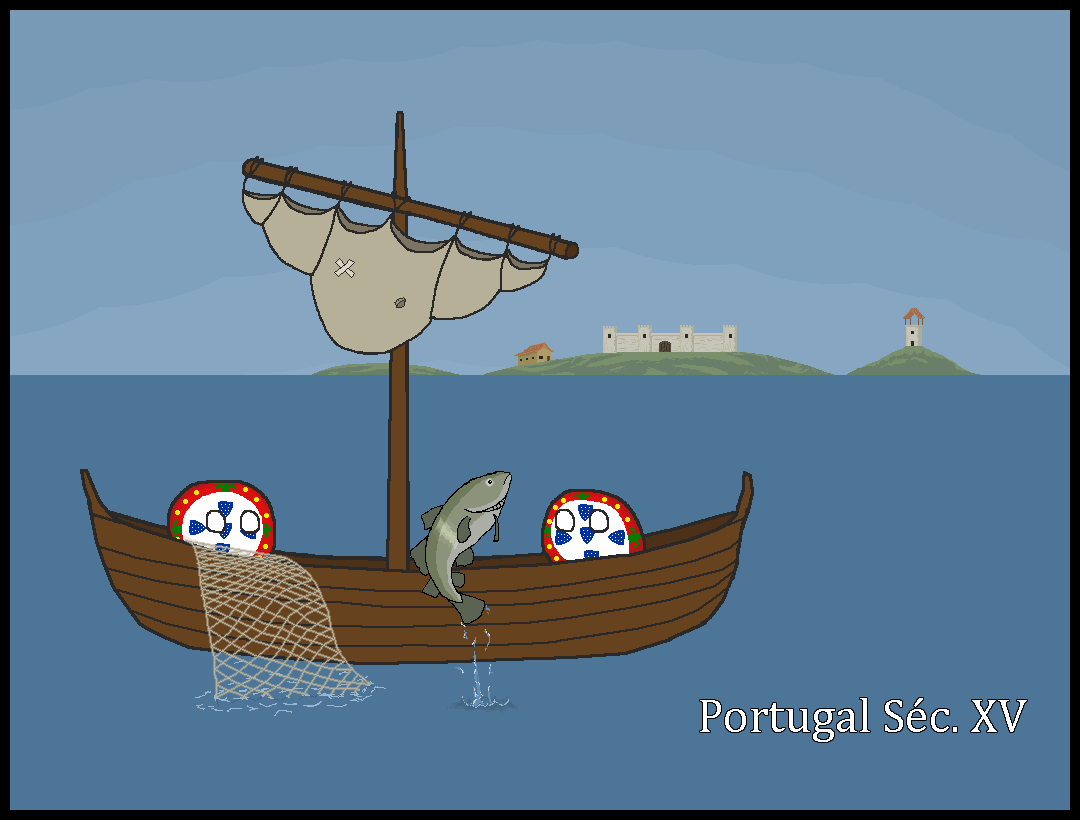
<style>
.page{position:relative;width:1080px;height:820px;background:#4d7597}
.page>*{position:absolute;margin:0}
.t1{font:48px "Cambria";color:#ffffff}
</style>
<div class="page">
<p class="t1" style="left:700px;top:698px;width:327px;height:44px">Portugal Séc. XV</p>
</div>
